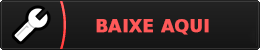
<style>
.page{position:relative;width:260px;height:50px}
.page>*{position:absolute;margin:0}
.t1{font:17.3px "PrimaSansBT-Bold";color:#ff5959;font-weight:bold}
</style>
<div class="page">
<p class="t1" style="left:96px;top:19px;width:113px;height:16px">BAIXE AQUI</p>
</div>
